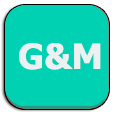
<style>
.page{position:relative;width:114px;height:114px;background:#00d1b2}
.page>*{position:absolute;margin:0}
.t1{font:35px "Tahoma-Bold";color:#ecf0f1}
</style>
<div class="page">
<p class="t1" style="left:19px;top:43px;width:82px;height:27px">G&amp;M</p>
</div>
